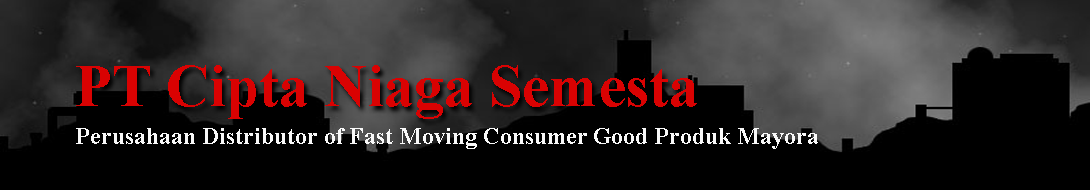
<style>
.page{position:relative;width:1090px;height:190px;background:#000000}
.page>*{position:absolute;margin:0}
.t1{font:60px "TimesNewRomanPS-BoldMT";color:#d90202}
.t2{font:24px "TimesNewRomanPS-BoldMT";color:#f9f9f9}
</style>
<div class="page">
<p class="t1" style="left:76px;top:65px;width:621px;height:54px">PT Cipta Niaga Semesta</p>
<p class="t2" style="left:76px;top:128px;width:742px;height:21px">Perusahaan Distributor of Fast Moving Consumer Good Produk Mayora</p>
</div>
